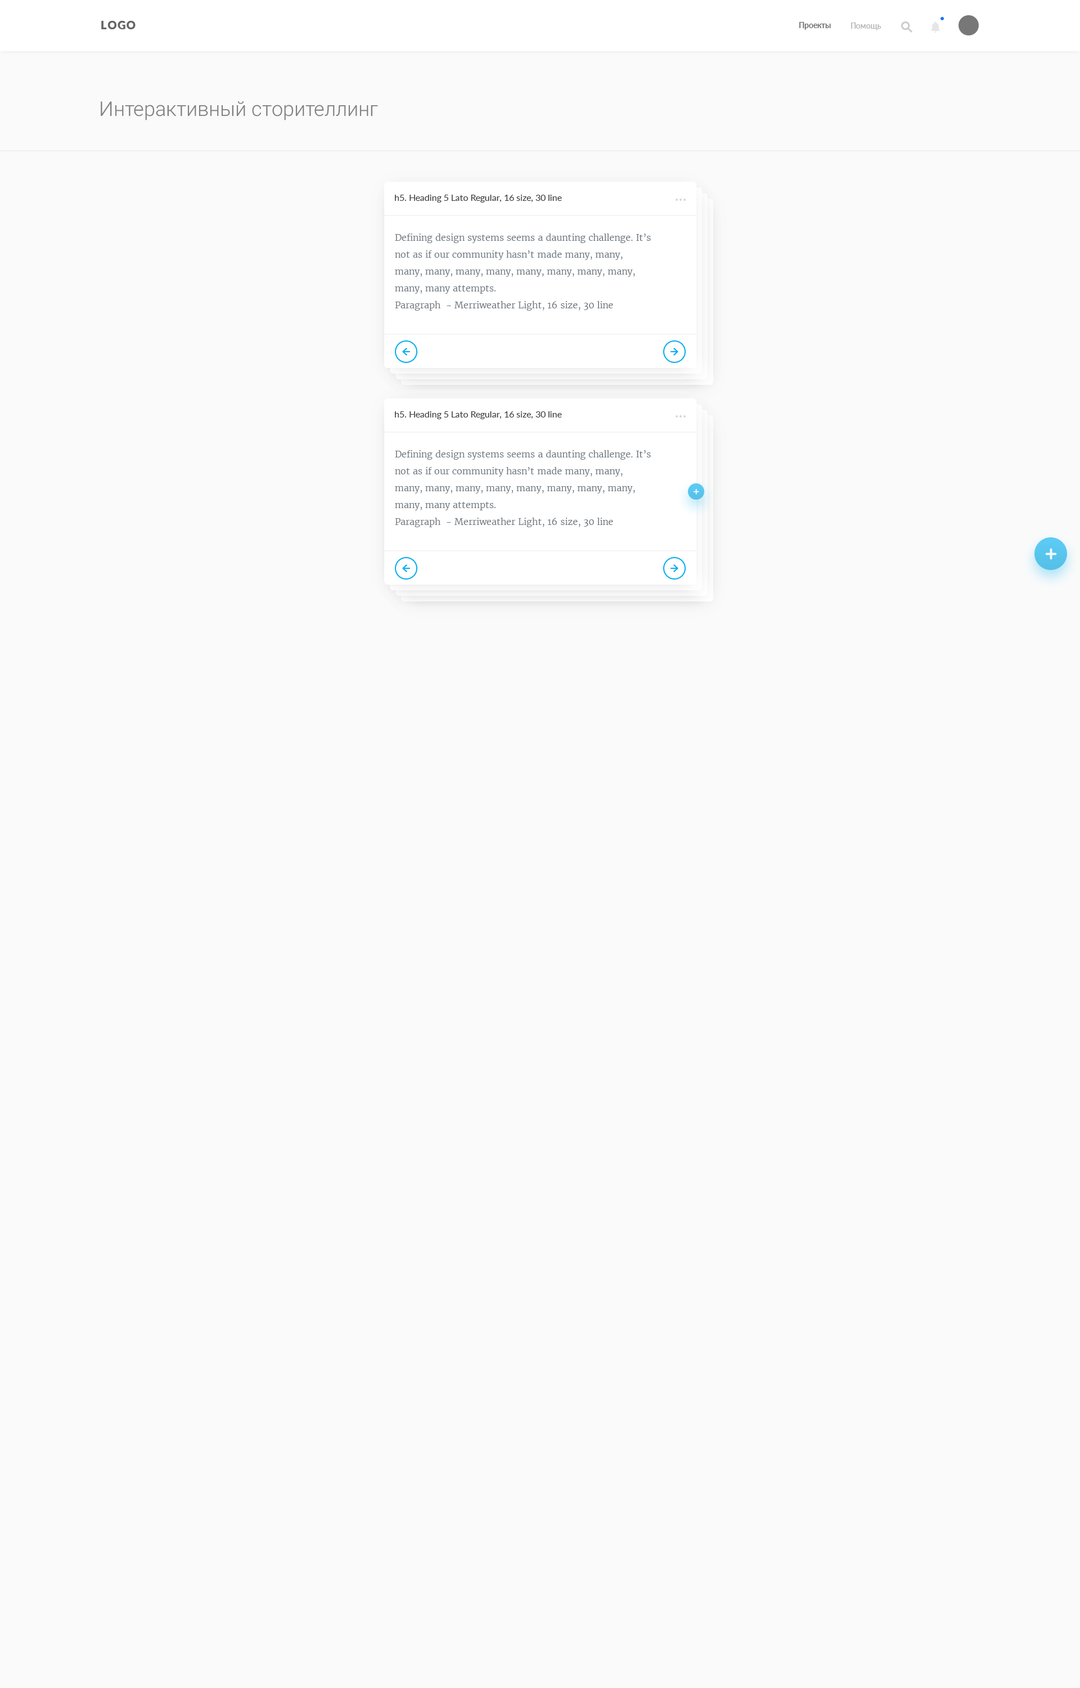
<style>
.page{position:relative;width:1080px;height:1688px;background:#fafafa}
.page>*{position:absolute;margin:0}
.t1{font:11.3px "Lato-Black";letter-spacing:0.08em;color:#666666;text-transform:uppercase}
.t2{font:8px "Lato-Semibold";color:#666666}
.t3{font:8px "Lato-Semibold";color:#b3b3b3}
.t4{font:20.2px "Roboto-Light";color:#808080}
.t5{font:9px "Lato-Regular";color:#393c3e}
.t6{font:9px/16.9px "Merriweather-Light";color:#71787e}
</style>
<div class="page">
<p class="t1" style="left:101px;top:21px;width:35px;height:8px">logo</p>
<p class="t2" style="left:799px;top:22px;width:32px;height:8px">Проекты</p>
<p class="t3" style="left:851px;top:23px;width:31px;height:7px">Помощь</p>
<p class="t4" style="left:101px;top:101px;width:277px;height:19px">Интерактивный сторителлинг</p>
<p class="t5" style="left:395px;top:195px;width:167px;height:8px">h5. Heading 5 Lato Regular, 16 size, 30 line</p>
<p class="t6" style="left:395px;top:233px;width:256px;height:78px">Defining design systems seems a daunting challenge. It’s not as if our community hasn’t made many, many, many, many, many, many, many, many, many, many, many, many attempts.<br>Paragraph  - Merriweather Light, 16 size, 30 line</p>
<p class="t5" style="left:395px;top:411px;width:167px;height:8px">h5. Heading 5 Lato Regular, 16 size, 30 line</p>
<p class="t6" style="left:395px;top:450px;width:256px;height:77px">Defining design systems seems a daunting challenge. It’s not as if our community hasn’t made many, many, many, many, many, many, many, many, many, many, many, many attempts.<br>Paragraph  - Merriweather Light, 16 size, 30 line</p>
</div>
